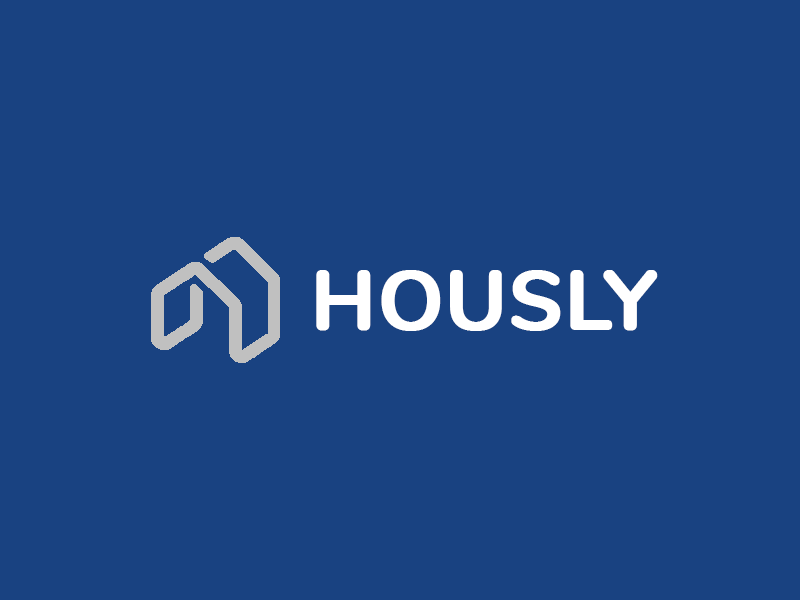
<style>
.page{position:relative;width:800px;height:600px;background:#194281}
.page>*{position:absolute;margin:0}
.t1{font:84px "Nunito-Bold";color:#ffffff;text-transform:uppercase;font-weight:bold}
</style>
<div class="page">
<p class="t1" style="left:316px;top:270px;width:342px;height:61px">HOUSLY</p>
</div>
